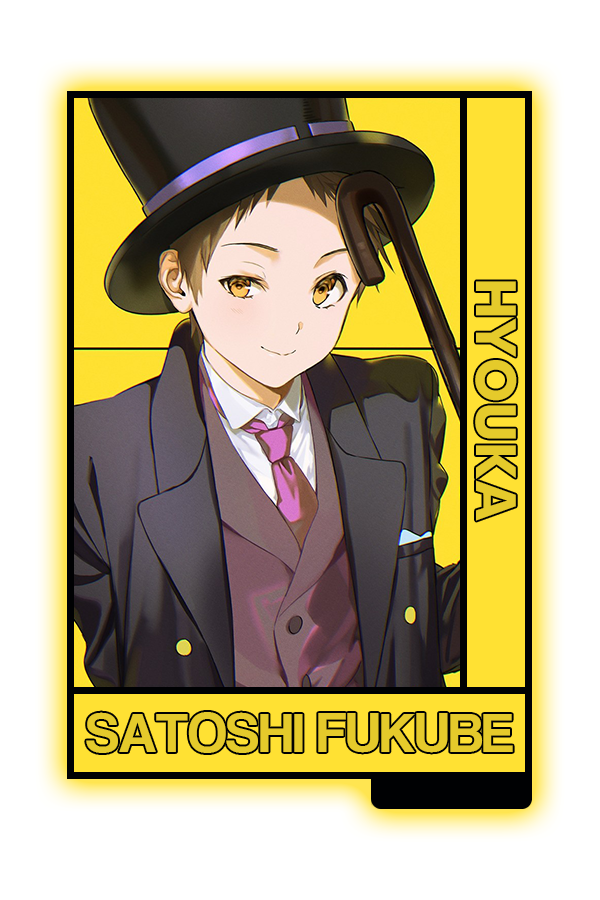
<style>
.page{position:relative;width:600px;height:900px;background:#ffffff}
.page>*{position:absolute;margin:0}
.t1{font:57.7px "CoolveticaRg-Regular";color:#e5ca2b}
</style>
<div class="page">
<p class="t1" style="left:86px;top:712px;width:427px;height:41px">SATOSHI FUKUBE</p>
</div>
